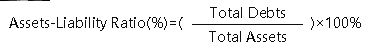
<style>
.page{position:relative;width:370px;height:50px;background:#ffffff}
.page>*{position:absolute;margin:0}
.t1{font:14px "MicrosoftYaHei";letter-spacing:-0.005em;color:#0d0d0d}
</style>
<div class="page">
<p class="t1" style="left:9px;top:17px;width:174px;height:14px">Assets-Liability Ratio(%)=(</p>
<p class="t1" style="left:210px;top:7px;width:75px;height:11px">Total Debts</p>
<p class="t1" style="left:311px;top:17px;width:50px;height:13px">)×100%</p>
<p class="t1" style="left:209px;top:31px;width:77px;height:11px">Total Assets</p>
</div>
